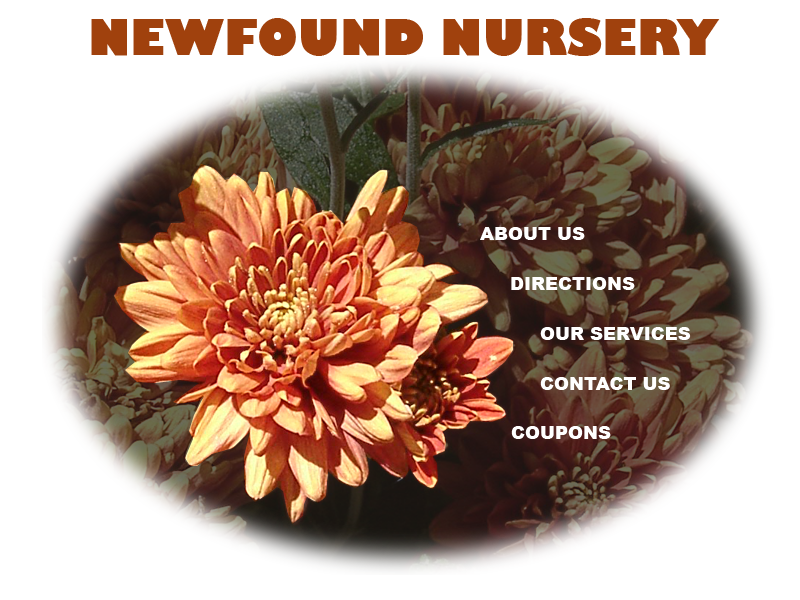
<style>
.page{position:relative;width:800px;height:600px;background:#ffffff}
.page>*{position:absolute;margin:0}
.t1{font:18px "Arial-Black";color:#ffffff}
</style>
<div class="page">
<p class="t1" style="left:480px;top:227px;width:105px;height:13px">ABOUT US</p>
<p class="t1" style="left:511px;top:277px;width:124px;height:13px">DIRECTIONS</p>
<p class="t1" style="left:540px;top:327px;width:151px;height:13px">OUR SERVICES</p>
<p class="t1" style="left:540px;top:377px;width:130px;height:13px">CONTACT US</p>
<p class="t1" style="left:511px;top:426px;width:100px;height:13px">COUPONS</p>
</div>
